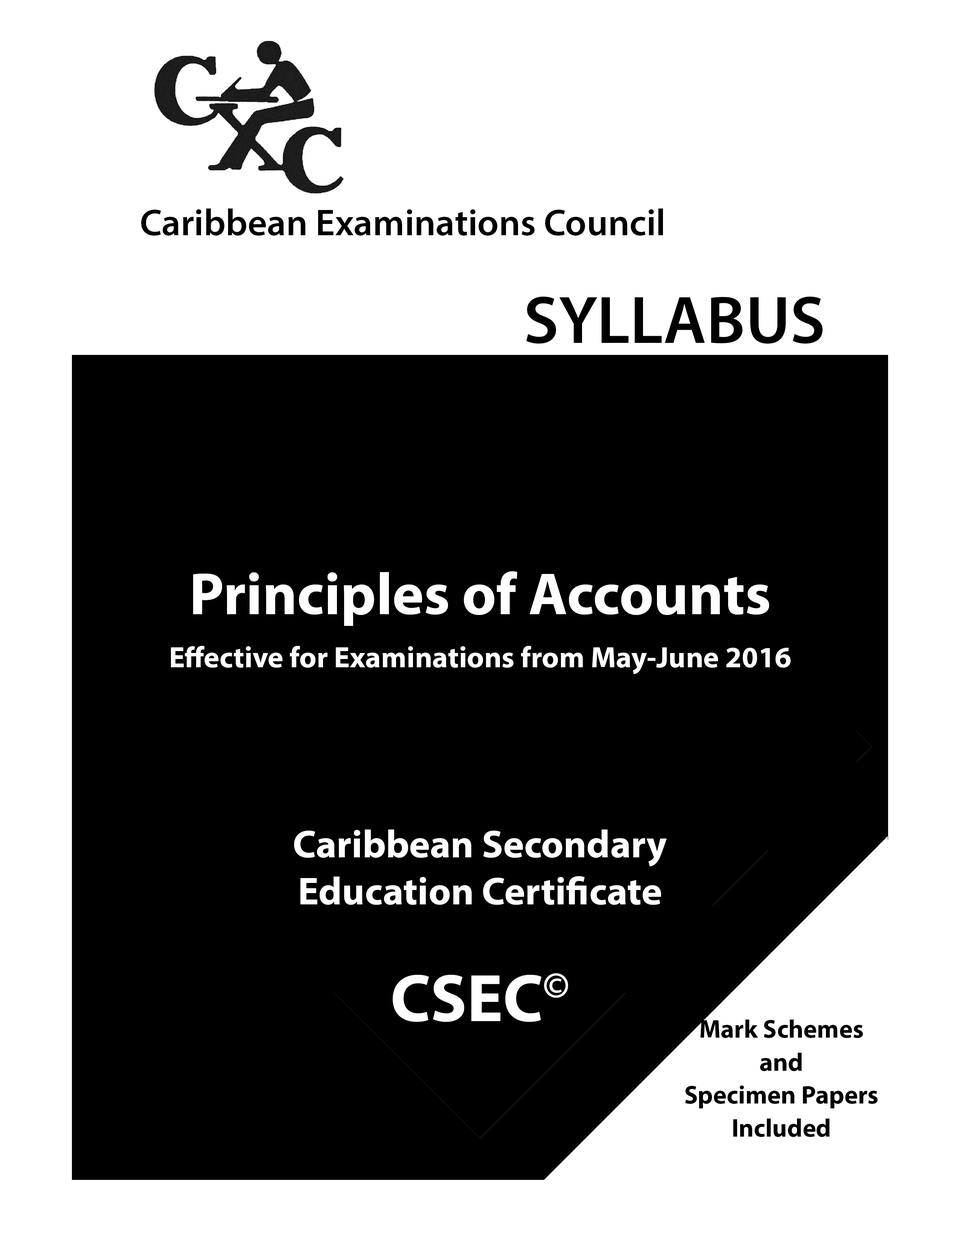
<style>
.page{position:relative;width:960px;height:1242px;background:#000000}
.page>*{position:absolute;margin:0}
.t1{font:37.6px "MyriadPro-Semibold";color:#000000}
.t2{font:67.4px "MyriadPro-Semibold";color:#000000}
.t3{font:29.8px/53.3px "MyriadPro-Bold";color:#ffffff}
.t4{font:59.6px/53.3px "MyriadPro-Bold";color:#ffffff}
.t5{font:39.2px "MyriadPro-Bold";color:#ffffff}
.t6{font:67.4px "MyriadPro-Bold";color:#ffffff}
.t7{font:43.9px/32.9px "MyriadPro-Bold";color:#000000}
</style>
<div class="page">
<p class="t1" style="left:141px;top:209px;width:522px;height:27px">Caribbean Examinations Council</p>
<p class="t2" style="left:526px;top:297px;width:297px;height:47px">SYLLABUS</p>
<p class="t3" style="left:171px;top:571px;width:620px;height:451px;text-align:center"><span class="t4">Principles of Accounts<br></span>Effective for Examinations from May-June 2016<br><br><br><br><br><span class="t5">Caribbean Secondary<br>Education Certificate<br><br></span><span class="t6">CSEC©</span></p>
<p class="t7" style="left:685px;top:1020px;width:192px;height:117px;text-align:center">Mark Schemes <br>and<br>Specimen Papers<br>Included</p>
</div>
